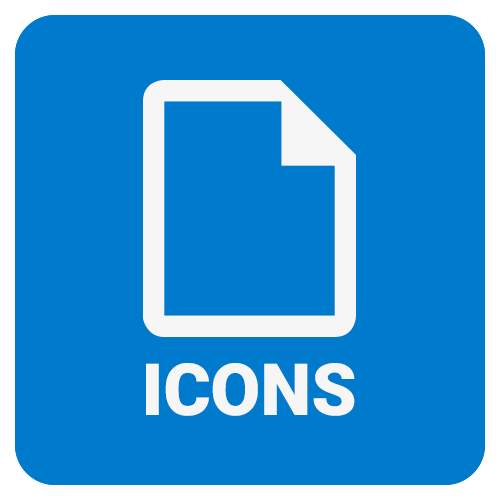
<style>
.page{position:relative;width:500px;height:500px;background:#007acc}
.page>*{position:absolute;margin:0}
.t1{font:72px "Roboto-Black";color:#f6f6f6}
</style>
<div class="page">
<p class="t1" style="left:146px;top:363px;width:209px;height:53px">ICONS</p>
</div>
